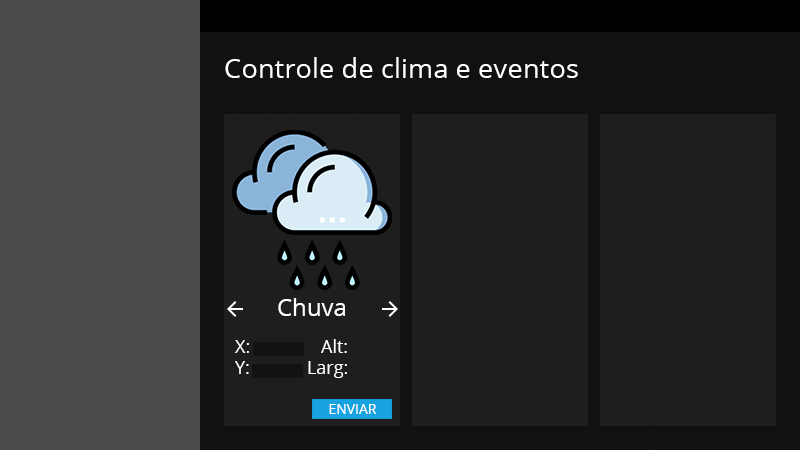
<style>
.page{position:relative;width:800px;height:450px;background:#1e1e1e}
.page>*{position:absolute;margin:0}
.t1{font:27.4px "OpenSans-Regular";color:#ffffff}
.t2{font:24px "OpenSans-Regular";color:#ffffff}
.t3{font:18px "OpenSans-Regular";color:#ffffff}
.t4{font:14px "OpenSans-Regular";color:#ffffff}
</style>
<div class="page">
<p class="t1" style="left:225px;top:57px;width:353px;height:21px">Controle de clima e eventos</p>
<p class="t2" style="left:278px;top:298px;width:67px;height:18px">Chuva</p>
<p class="t3" style="left:235px;top:339px;width:112px;height:39px">X:     Alt:<br>Y:  Larg:</p>
<p class="t4" style="left:329px;top:404px;width:48px;height:10px">ENVIAR</p>
</div>
